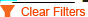
<style>
.page{position:relative;width:88px;height:17px;background:#ffffff}
.page>*{position:absolute;margin:0}
.t1{font:12px "ArialMT"}
</style>
<div class="page">
<p class="t1" style="left:21px;top:4px;width:65px;height:9px">Clear Filters</p>
</div>
